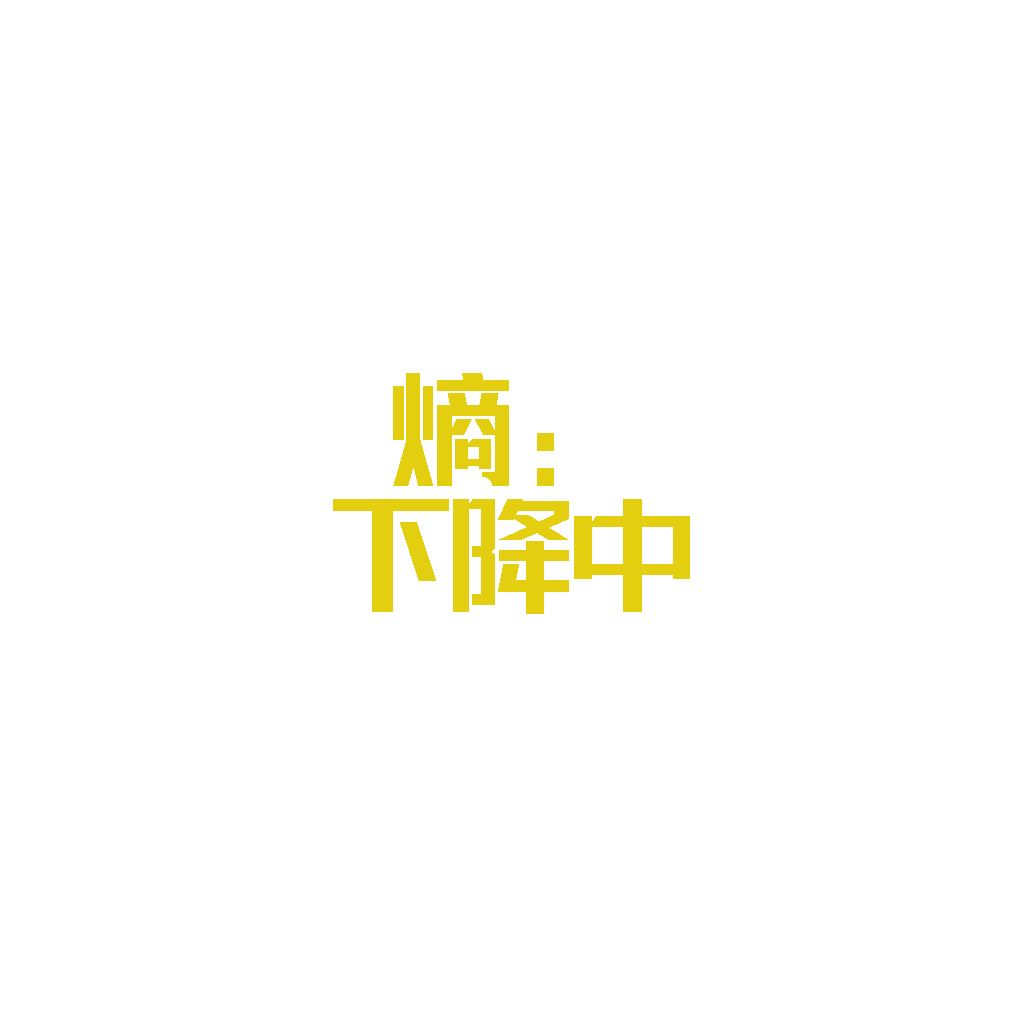
<style>
.page{position:relative;width:1024px;height:1024px;background:#ffffff}
.page>*{position:absolute;margin:0}
.t1{font:113px/126px "lianmengqiyilushuaizhengruiheiti-Regular";color:#e3cf10}
</style>
<div class="page">
<p class="t1" style="left:333px;top:373px;width:357px;height:241px;text-align:center">熵：<br>下降中</p>
</div>
